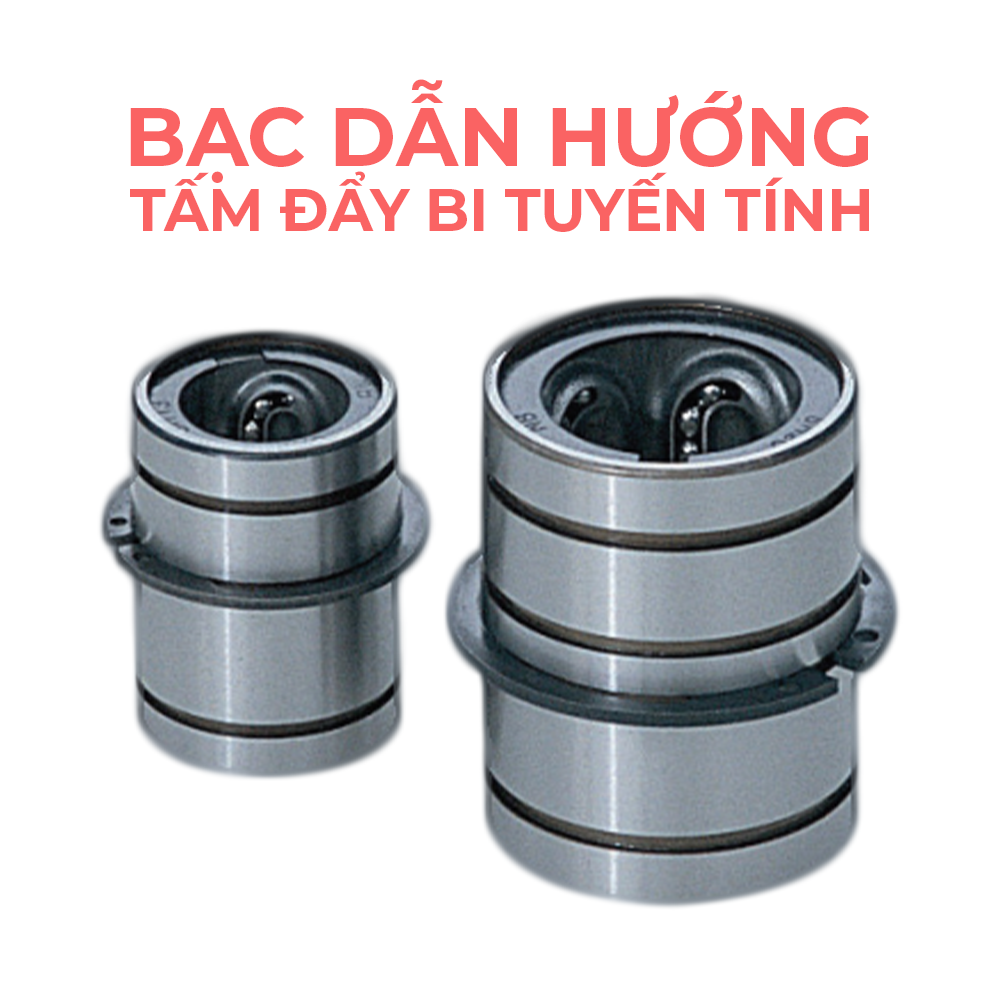
<style>
.page{position:relative;width:1000px;height:1000px;background:#ffffff}
.page>*{position:absolute;margin:0}
.t1{font:59.7px "Montserrat-Bold";color:#fa6363;text-transform:uppercase}
</style>
<div class="page">
<p class="t1" style="left:130px;top:79px;width:739px;height:153px;text-align:center">Bạc dẫn hướng tấm đẩy bi tuyến tính</p>
</div>
